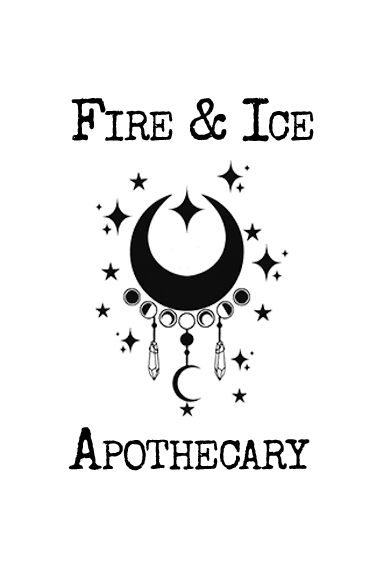
<style>
.page{position:relative;width:384px;height:576px;background:#ffffff}
.page>*{position:absolute;margin:0}
.t1{font:59.4px "SpecialElite-Regular";letter-spacing:-0.04em;color:#000000;font-variant:small-caps}
</style>
<div class="page">
<p class="t1" style="left:71px;top:97px;width:243px;height:45px">Fire &amp; Ice</p>
<p class="t1" style="left:69px;top:427px;width:241px;height:44px">Apothecary</p>
</div>
